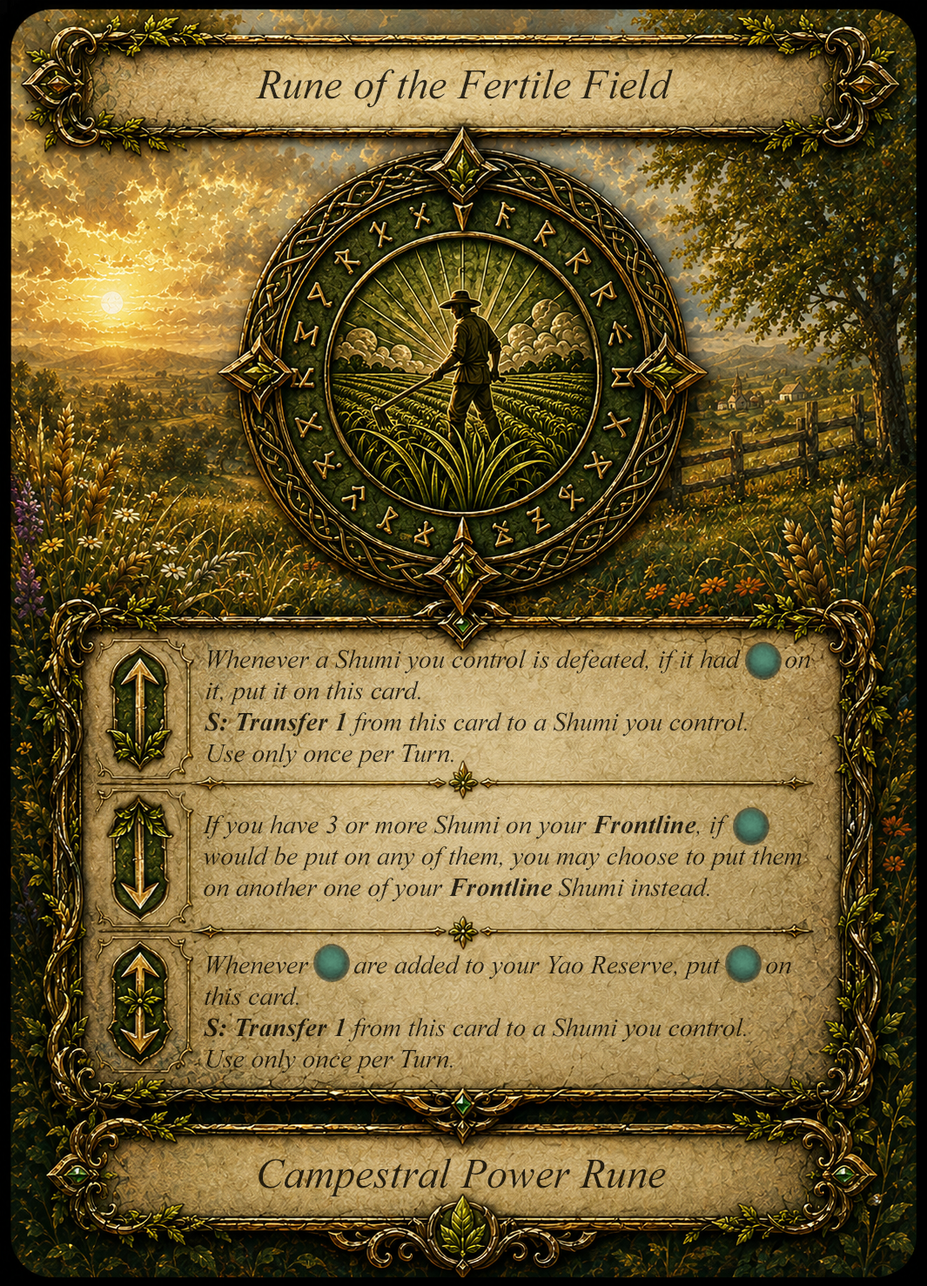
<style>
.page{position:relative;width:927px;height:1286px}
.page>*{position:absolute;margin:0}
.t1{font:41.8px "TimesNewRomanPS-ItalicMT";color:#2b2416}
.t2{font:26.1px/31.3px "TimesNewRomanPS-ItalicMT";color:#261f12}
.t3{font:26.1px/31.3px "TimesNewRomanPS-BoldItalicMT";color:#261f12}
.t4{font:26.1px/31.3px "TimesNewRomanPS-ItalicMT";color:#262013}
.t5{font:26.1px/31.3px "TimesNewRomanPS-BoldItalicMT";color:#262013}
.t6{font:26.1px/31.3px "TimesNewRomanPS-ItalicMT";color:#221c0e}
.t7{font:26.1px/31.3px "TimesNewRomanPS-BoldItalicMT";color:#221c0e}
.t8{font:41.8px "TimesNewRomanPS-ItalicMT";color:#241d0e}
</style>
<div class="page">
<p class="t1" style="left:255px;top:69px;width:418px;height:39px">Rune of the Fertile Field</p>
<p class="t2" style="left:205px;top:650px;width:606px;height:118px">Whenever a Shumi you control is defeated, if it had       on it, put it on this card.<br><span class="t3">S: Transfer 1 </span>from this card to a Shumi you control. <br>Use only once per Turn.</p>
<p class="t4" style="left:202px;top:815px;width:600px;height:87px">If you have 3 or more Shumi on your <span class="t5">Frontline</span>, if        would be put on any of them, you may choose to put them<br>on another one of your <span class="t5">Frontline</span> Shumi instead.</p>
<p class="t6" style="left:204px;top:955px;width:587px;height:119px">Whenever       are added to your Yao Reserve, put       on<br>this card.<br><span class="t7">S: Transfer 1 </span>from this card to a Shumi you control. <br>Use only once per Turn.</p>
<p class="t8" style="left:259px;top:1158px;width:407px;height:39px">Campestral Power Rune</p>
</div>
